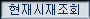
<style>
.page{position:relative;width:90px;height:19px;background:#d8dee3}
.page>*{position:absolute;margin:0}
.t1{font:12px "GulimChe";color:#0e2747}
</style>
<div class="page">
<p class="t1" style="left:9px;top:4px;width:70px;height:11px">현재시재조회</p>
</div>
